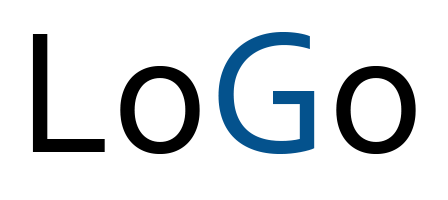
<style>
.page{position:relative;width:448px;height:200px;background:#ffffff}
.page>*{position:absolute;margin:0}
.t1{font:180px "Corbel";color:#000000}
.t2{font:180px "Corbel";color:#04528e}
</style>
<div class="page">
<p class="t1" style="left:32px;top:32px;width:384px;height:122px">Lo<span class="t2">G</span>o</p>
</div>
